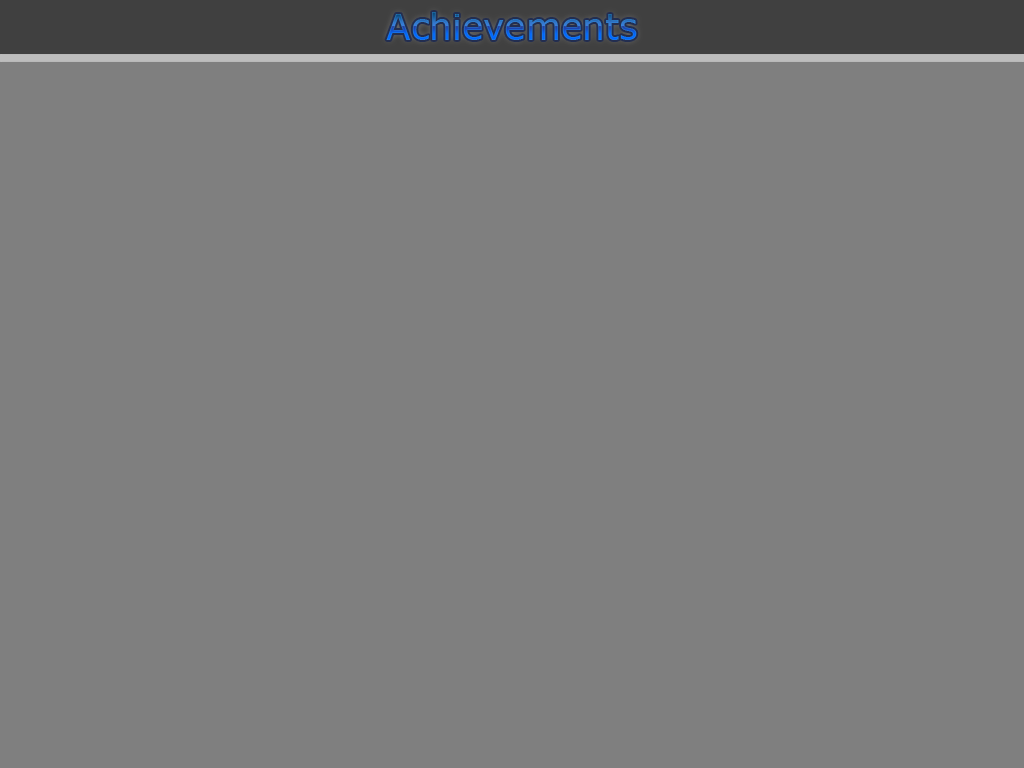
<style>
.page{position:relative;width:1024px;height:768px;background:#7f7f7f}
.page>*{position:absolute;margin:0}
.t1{font:36px "Verdana"}
</style>
<div class="page">
<p class="t1" style="left:386px;top:12px;width:251px;height:28px">Achievements</p>
</div>
